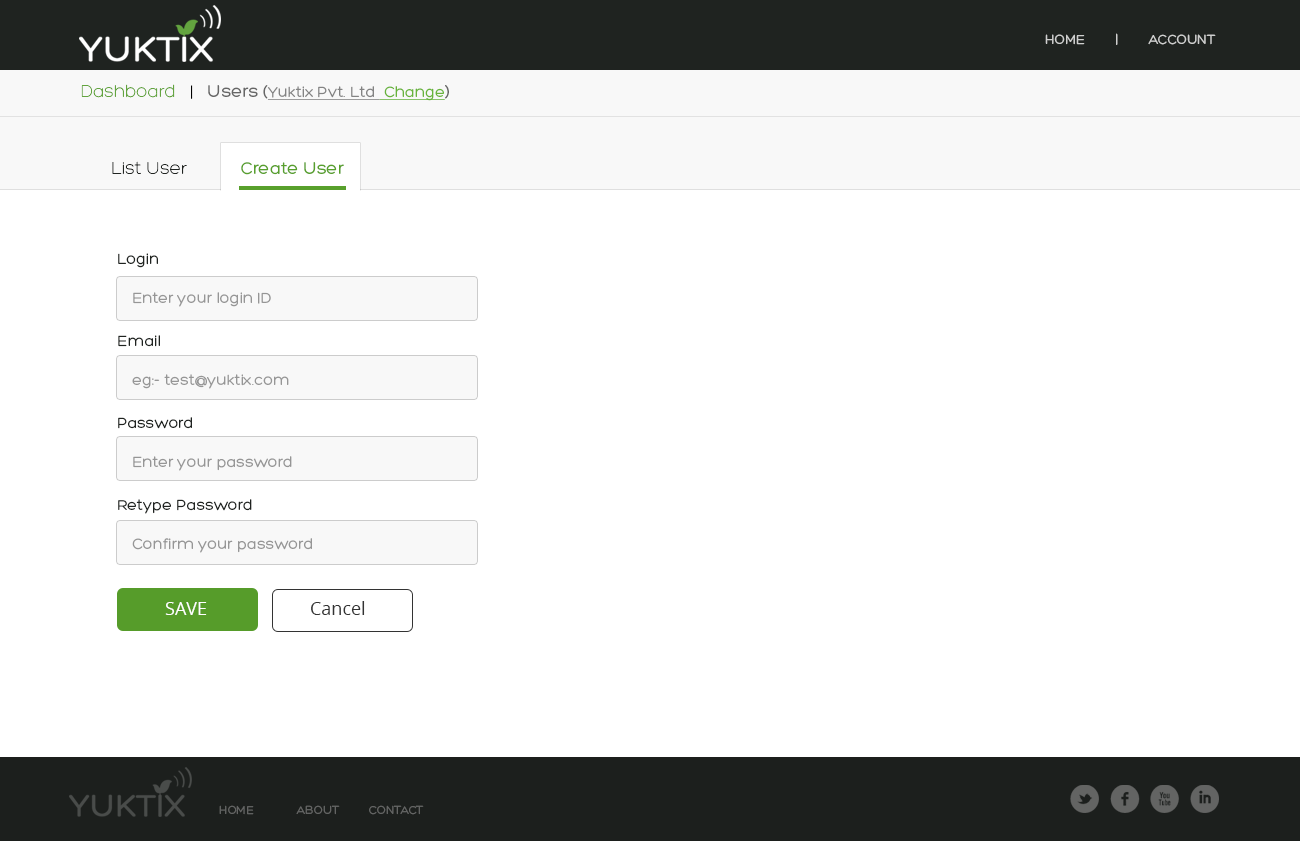
<style>
.page{position:relative;width:1300px;height:841px;background:#ffffff}
.page>*{position:absolute;margin:0}
.t1{font:14px "Hero";color:#cecfce;text-transform:uppercase}
.t2{font:16px "Hero";color:#838383;text-decoration:underline}
.t3{font:18px "Hero-Light";color:#63a43f}
.t4{font:18px "Hero-Light";color:#000000}
.t5{font:18px "Hero";color:#666666}
.t6{font:16px "Hero";color:#68b43a;text-decoration:underline}
.t7{font:18px "Hero";color:#58a02c}
.t8{font:18px "Hero-Light";color:#1f2320}
.t9{font:16px/41px "Hero";color:#1f2320}
.t10{font:16px/41px "Hero";color:#969696}
.t11{font:18px "OpenSans";color:#ffffff}
.t12{font:18px "OpenSans";color:#333333}
.t13{font:40.5px "Socialico";letter-spacing:0.2em;color:#636463}
.t14{font:12.2px "Hero";color:#636463;text-transform:uppercase}
</style>
<div class="page">
<p class="t1" style="left:1045px;top:33px;width:171px;height:12px">home        |        Account</p>
<p class="t2" style="left:81px;top:84px;width:368px;height:17px"><span class="t3">Dashboard</span><span class="t4">   |   </span><span class="t5">Users (</span>Yuktix Pvt. Ltd <span class="t6"> Change</span><span class="t5">)</span></p>
<p class="t7" style="left:112px;top:161px;width:232px;height:14px"><span class="t8">List User          </span> Create User</p>
<p class="t9" style="left:118px;top:253px;width:134px;height:261px">Login<br><br>Email<br><br>Password<br><br>Retype Password</p>
<p class="t10" style="left:132px;top:292px;width:180px;height:261px">Enter your login ID<br><br>eg:- test@yuktix.com<br><br>Enter your password<br><br>Confirm your password</p>
<p class="t11" style="left:165px;top:602px;width:42px;height:13px">SAVE</p>
<p class="t12" style="left:311px;top:601px;width:54px;height:14px">Cancel</p>
<p class="t13" style="left:1070px;top:785px;width:149px;height:28px">lfxi</p>
<p class="t14" style="left:219px;top:805px;width:205px;height:10px">home             About         Contact</p>
</div>
